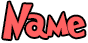
<style>
.page{position:relative;width:88px;height:43px;background:#ffffff}
.page>*{position:absolute;margin:0}
.t1{font:45.3px "Grinched";color:#ff6161;scale:1.05 1}
</style>
<div class="page">
<p class="t1" style="left:3px;top:2px;width:82px;height:38px">Name</p>
</div>
